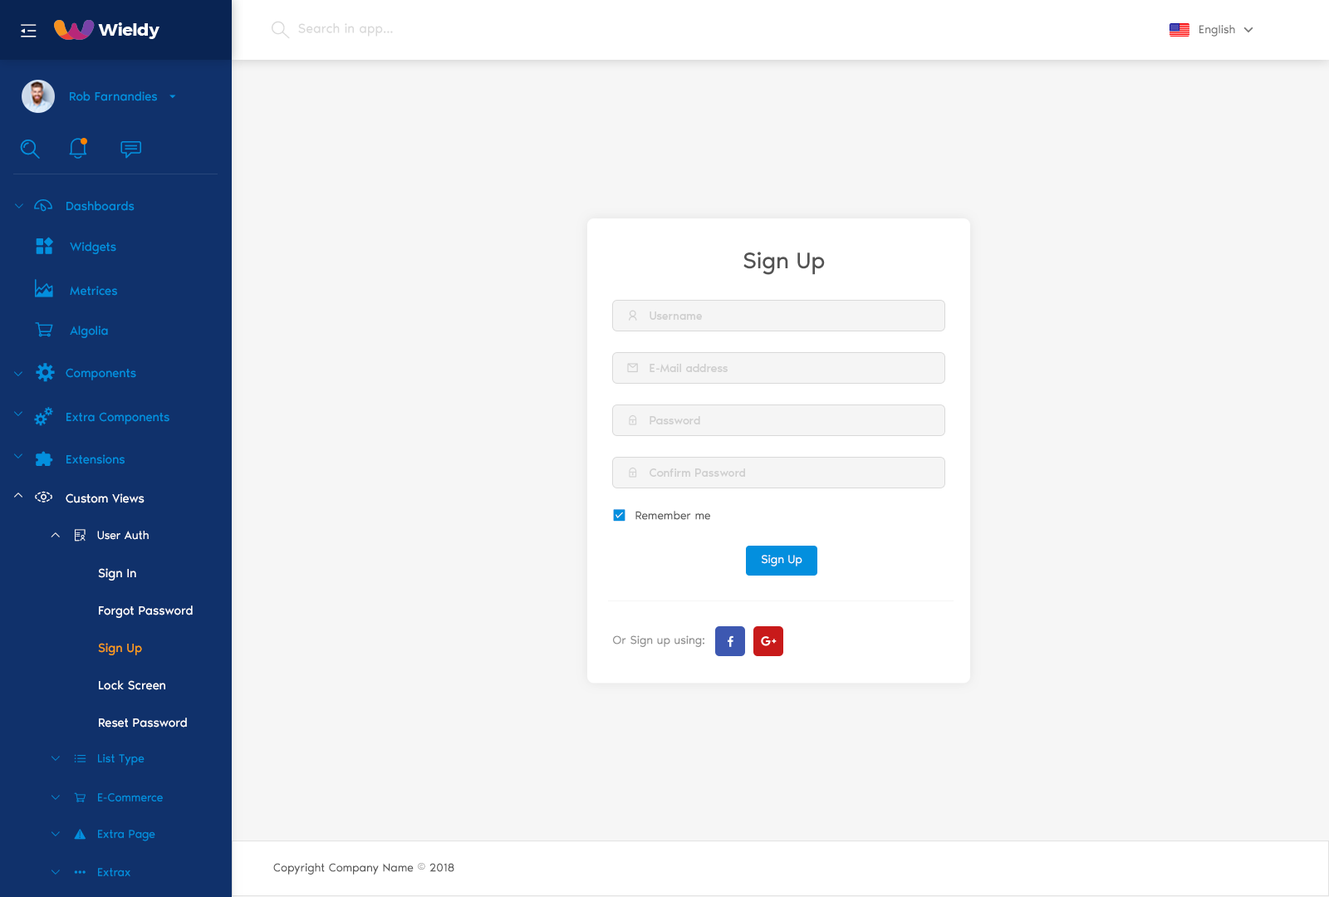
<style>
.page{position:relative;width:1329px;height:897px;background:#f6f6f6}
.page>*{position:absolute;margin:0}
.t1{font:13.3px "NoirPro-Regular";color:#d9d9d9}
.t2{font:11.6px "NoirPro-Regular";color:#757575}
.t3{font:12.5px "NoirPro-Regular";color:#038fde}
.t4{font:10px "gaxonant"}
.t5{font:18.3px "gaxonant";color:#038fde}
.t6{font:23.3px "NoirPro-Regular";color:#535353}
.t7{font:11.6px "NoirPro-Regular";color:#cfcfcf}
.t8{font:9.7px "gaxonant";color:#038fde}
.t9{font:18.3px "gaxonant";color:#ffffff}
.t10{font:12.5px "NoirPro-Regular";color:#ffffff}
.t11{font:11.6px "NoirPro-Regular";color:#595959}
.t12{font:10px "gaxonant";color:#ffffff}
.t13{font:11.6px "gaxonant";color:#ffffff}
.t14{font:11.6px "NoirPro-Regular";color:#ffffff}
.t15{font:12.5px/33.2px "NoirPro-Regular";color:#ffffff}
.t16{font:12.5px/33.2px "NoirPro-Regular";color:#fe9e15}
.t17{font:11.6px "NoirPro-Regular";color:#8c8c8c}
.t18{font:10px "gaxonant";color:#038fde}
.t19{font:11.6px "gaxonant";color:#038fde}
.t20{font:11.6px "NoirPro-Regular";color:#038fde}
</style>
<div class="page">
<p class="t1" style="left:298px;top:23px;width:95px;height:14px">Search in app...</p>
<p class="t2" style="left:1200px;top:25px;width:35px;height:12px">English</p>
<p class="t3" style="left:70px;top:91px;width:87px;height:10px">Rob Farnandies</p>
<p class="t4" style="left:15px;top:204px;width:8px;height:5px">2</p>
<p class="t5" style="left:34px;top:199px;width:18px;height:13px">-</p>
<p class="t3" style="left:66px;top:201px;width:69px;height:10px">Dashboards</p>
<p class="t3" style="left:70px;top:242px;width:46px;height:12px">Widgets</p>
<p class="t6" style="left:743px;top:252px;width:82px;height:23px">Sign Up</p>
<p class="t5" style="left:35px;top:279px;width:18px;height:18px">m</p>
<p class="t3" style="left:70px;top:286px;width:47px;height:10px">Metrices</p>
<p class="t7" style="left:650px;top:312px;width:52px;height:8px">Username</p>
<p class="t3" style="left:70px;top:326px;width:38px;height:12px">Algolia</p>
<p class="t5" style="left:36px;top:363px;width:19px;height:19px">%</p>
<p class="t7" style="left:650px;top:363px;width:78px;height:9px">E-Mail address</p>
<p class="t8" style="left:14px;top:371px;width:8px;height:5px">2</p>
<p class="t3" style="left:66px;top:368px;width:70px;height:12px">Components</p>
<p class="t8" style="left:14px;top:411px;width:8px;height:5px">2</p>
<p class="t3" style="left:66px;top:412px;width:103px;height:12px">Extra Components</p>
<p class="t7" style="left:650px;top:416px;width:50px;height:8px">Password</p>
<p class="t8" style="left:14px;top:454px;width:8px;height:5px">2</p>
<p class="t3" style="left:66px;top:454px;width:59px;height:10px">Extensions</p>
<p class="t7" style="left:650px;top:469px;width:95px;height:8px">Confirm Password</p>
<p class="t4" style="left:14px;top:493px;width:8px;height:5px">5</p>
<p class="t9" style="left:35px;top:491px;width:17px;height:12px">,</p>
<p class="t10" style="left:66px;top:493px;width:79px;height:10px">Custom Views</p>
<p class="t11" style="left:635px;top:511px;width:75px;height:9px">Remember me</p>
<p class="t12" style="left:51px;top:532px;width:9px;height:5px">5</p>
<p class="t13" style="left:75px;top:529px;width:11px;height:13px">r</p>
<p class="t14" style="left:97px;top:531px;width:52px;height:9px">User Auth</p>
<p class="t14" style="left:762px;top:555px;width:40px;height:12px">Sign Up</p>
<p class="t15" style="left:98px;top:568px;width:95px;height:160px">Sign In<br>Forgot Password<br><span class="t16">Sign Up<br></span>Lock Screen<br>Reset Password</p>
<p class="t17" style="left:613px;top:635px;width:91px;height:12px">Or Sign up using:</p>
<p class="t18" style="left:52px;top:756px;width:8px;height:5px">2</p>
<p class="t19" style="left:74px;top:754px;width:12px;height:9px">h</p>
<p class="t20" style="left:98px;top:754px;width:47px;height:12px">List Type</p>
<p class="t18" style="left:52px;top:795px;width:8px;height:5px">2</p>
<p class="t20" style="left:98px;top:793px;width:65px;height:9px">E-Commerce</p>
<p class="t18" style="left:52px;top:832px;width:8px;height:5px">2</p>
<p class="t19" style="left:74px;top:829px;width:12px;height:11px">~</p>
<p class="t20" style="left:98px;top:830px;width:57px;height:12px">Extra Page</p>
<p class="t18" style="left:52px;top:870px;width:8px;height:5px">2</p>
<p class="t20" style="left:98px;top:868px;width:32px;height:8px">Extrax</p>
<p class="t11" style="left:273px;top:863px;width:181px;height:12px">Copyright Company Name © 2018</p>
<p class="t19" style="left:74px;top:871px;width:12px;height:3px">{</p>
</div>
